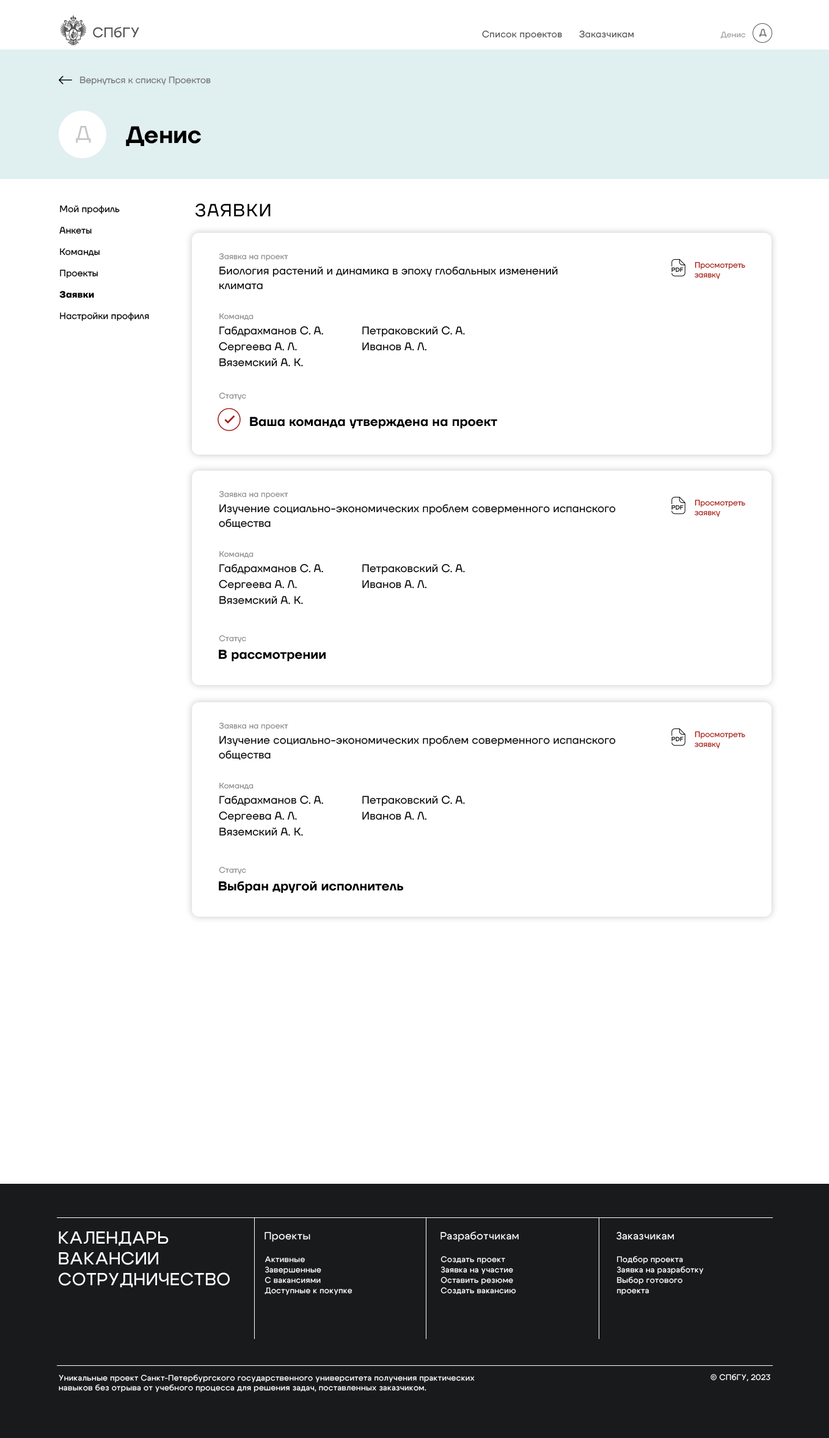
<style>
.page{position:relative;width:829px;height:1438px;background:#ffffff}
.page>*{position:absolute;margin:0}
.t1{font:13.8px "Cygre-Medium";letter-spacing:0.025em;color:#555555}
.t2{font:9.2px "TTFirsNeue-Regular";color:#636466}
.t3{font:9.2px "TTFirsNeue-Regular";letter-spacing:0.025em;color:#555555}
.t4{font:7.9px "TTFirsNeue-Regular";letter-spacing:0.01em;color:#9c9c9c}
.t5{font:9.2px "TTFirsNeue-Regular";color:#77787b}
.t6{font:20.2px "TTFirsNeue-Regular";color:#c4c6c8}
.t7{font:23.8px "TTFirsNeue-DemiBold";color:#000000}
.t8{font:9.2px/21.4px "TTFirsNeue-Regular";letter-spacing:0.013em;color:#000000}
.t9{font:9.2px/21.4px "TTFirsNeue-Bold";letter-spacing:0.013em;color:#000000}
.t10{font:17.7px "TTFirsNeue-Regular";letter-spacing:0.05em;color:#000000}
.t11{font:7.9px "TTFirsNeue-Regular";letter-spacing:0.01em;color:#898989}
.t12{font:11px/14.7px "TTFirsNeue-Regular";letter-spacing:0.01em;color:#000000}
.t13{font:7.9px "TTFirsNeue-Regular";color:#a52019}
.t14{font:11px/15.9px "TTFirsNeue-Regular";letter-spacing:0.01em;color:#000000}
.t15{font:12.8px "TTFirsNeue-DemiBold";letter-spacing:0.01em;color:#000000}
.t16{font:17.4px "Cygre-Medium";letter-spacing:0.025em;color:#ffffff}
.t17{font:10.4px "Cygre-Medium";letter-spacing:0.025em;color:#ffffff}
.t18{font:8px/10.4px "Cygre-Medium";letter-spacing:0.025em;color:#ffffff}
.t19{font:8px "Cygre-Medium";letter-spacing:0.025em;color:#ffffff}
</style>
<div class="page">
<p class="t1" style="left:93px;top:26px;width:46px;height:12px">СПбГУ</p>
<p class="t2" style="left:760px;top:29px;width:7px;height:8px">Д</p>
<p class="t3" style="left:482px;top:31px;width:152px;height:8px">Список проектов      Заказчикам</p>
<p class="t4" style="left:720px;top:31px;width:26px;height:7px">Денис</p>
<p class="t5" style="left:80px;top:76px;width:131px;height:9px">Вернуться к списку Проектов</p>
<p class="t6" style="left:76px;top:126px;width:15px;height:17px">Д</p>
<p class="t7" style="left:126px;top:126px;width:75px;height:20px">Денис</p>
<p class="t8" style="left:59px;top:205px;width:90px;height:116px">Мой профиль<br>Анкеты<br>Команды<br>Проекты<br><span class="t9">Заявки<br></span>Настройки профиля</p>
<p class="t10" style="left:195px;top:203px;width:76px;height:14px">ЗАЯВКИ</p>
<p class="t11" style="left:219px;top:253px;width:69px;height:8px">Заявка на проект</p>
<p class="t12" style="left:219px;top:266px;width:339px;height:24px">Биология растений и динамика в эпоху глобальных изменений<br>климата</p>
<p class="t13" style="left:695px;top:262px;width:51px;height:17px">Просмотреть<br>заявку</p>
<p class="t11" style="left:219px;top:313px;width:35px;height:7px">Команда</p>
<p class="t14" style="left:219px;top:326px;width:104px;height:41px">Габдрахманов С. А.<br>Сергеева А. Л.<br>Вяземский А. К.</p>
<p class="t14" style="left:362px;top:326px;width:103px;height:25px">Петраковский С. А.<br>Иванов А. Л.</p>
<p class="t11" style="left:219px;top:392px;width:27px;height:8px">Статус</p>
<p class="t15" style="left:250px;top:417px;width:247px;height:11px">Ваша команда утверждена на проект</p>
<p class="t11" style="left:219px;top:491px;width:69px;height:8px">Заявка на проект</p>
<p class="t12" style="left:219px;top:504px;width:397px;height:25px">Изучение социально-экономических проблем соверменного испанского<br>общества</p>
<p class="t13" style="left:695px;top:499px;width:51px;height:18px">Просмотреть<br>заявку</p>
<p class="t11" style="left:219px;top:551px;width:35px;height:7px">Команда</p>
<p class="t14" style="left:219px;top:563px;width:104px;height:41px">Габдрахманов С. А.<br>Сергеева А. Л.<br>Вяземский А. К.</p>
<p class="t14" style="left:362px;top:563px;width:103px;height:25px">Петраковский С. А.<br>Иванов А. Л.</p>
<p class="t11" style="left:219px;top:635px;width:27px;height:8px">Статус</p>
<p class="t15" style="left:219px;top:650px;width:107px;height:11px">В рассмотрении</p>
<p class="t11" style="left:219px;top:722px;width:69px;height:8px">Заявка на проект</p>
<p class="t12" style="left:219px;top:736px;width:397px;height:24px">Изучение социально-экономических проблем соверменного испанского<br>общества</p>
<p class="t13" style="left:695px;top:731px;width:51px;height:18px">Просмотреть<br>заявку</p>
<p class="t11" style="left:219px;top:782px;width:35px;height:8px">Команда</p>
<p class="t14" style="left:219px;top:795px;width:104px;height:41px">Габдрахманов С. А.<br>Сергеева А. Л.<br>Вяземский А. К.</p>
<p class="t14" style="left:362px;top:795px;width:103px;height:25px">Петраковский С. А.<br>Иванов А. Л.</p>
<p class="t11" style="left:219px;top:867px;width:27px;height:7px">Статус</p>
<p class="t15" style="left:219px;top:881px;width:184px;height:12px">Выбран другой исполнитель</p>
<p class="t16" style="left:59px;top:1231px;width:171px;height:57px">КАЛЕНДАРЬ<br>ВАКАНСИИ<br>СОТРУДНИЧЕСТВО</p>
<p class="t17" style="left:265px;top:1231px;width:45px;height:11px">Проекты</p>
<p class="t17" style="left:441px;top:1231px;width:78px;height:11px">Разработчикам</p>
<p class="t17" style="left:617px;top:1231px;width:58px;height:9px">Заказчикам</p>
<p class="t18" style="left:265px;top:1256px;width:88px;height:39px">Активные<br>Завершенные<br>С вакансиями<br>Доступные к покупке</p>
<p class="t18" style="left:441px;top:1256px;width:75px;height:38px">Создать проект<br>Заявка на участие<br>Оставить резюме<br>Создать вакансию</p>
<p class="t18" style="left:617px;top:1256px;width:87px;height:39px">Подбор проекта<br>Заявка на разработку<br>Выбор готового<br>проекта</p>
<p class="t19" style="left:711px;top:1374px;width:60px;height:8px">© СПбГУ, 2023</p>
<p class="t19" style="left:59px;top:1374px;width:416px;height:18px">Уникальные проект Санкт-Петербургского государственного университета получения практических навыков без отрыва от учебного процесса для решения задач, поставленных заказчиком.</p>
</div>
